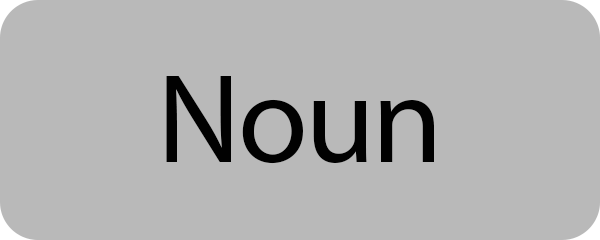
<style>
.page{position:relative;width:600px;height:240px;background:#b9b9b9}
.page>*{position:absolute;margin:0}
.t1{font:127px "MyriadPro-Regular";letter-spacing:-0.02em;color:#010101}
</style>
<div class="page">
<p class="t1" style="left:166px;top:76px;width:268px;height:88px">Noun</p>
</div>
